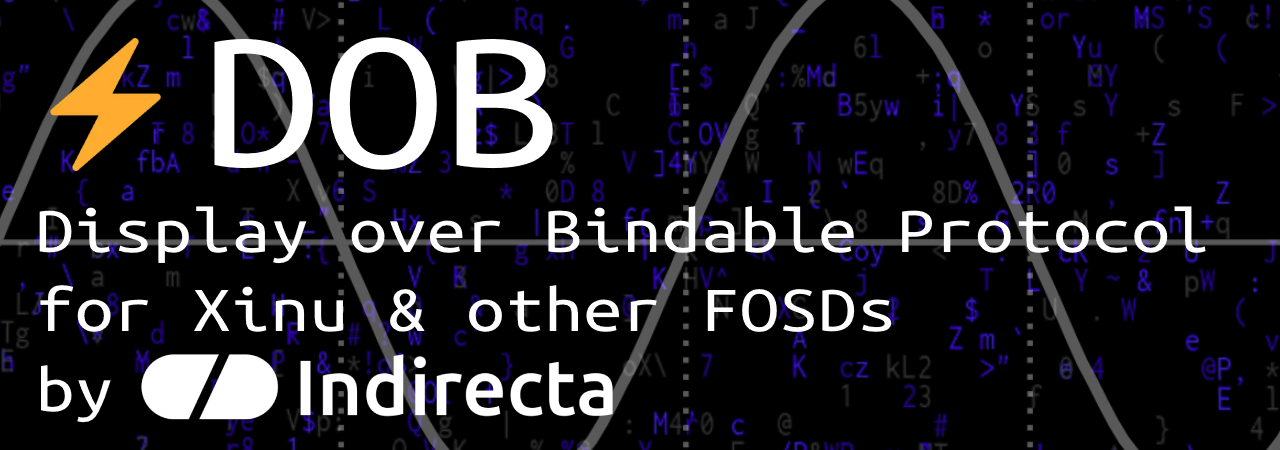
<style>
.page{position:relative;width:1280px;height:450px;background:#000000}
.page>*{position:absolute;margin:0}
.t1{font:204.9px "UbuntuMono-Regular";color:#ffffff;scale:1.18 1}
.t2{font:66.2px "UbuntuMono-Regular";color:#ffffff;scale:1.18 1}
</style>
<div class="page">
<p class="t1" style="left:214px;top:37px;width:339px;height:133px">DOB</p>
<p class="t2" style="left:39px;top:206px;width:1167px;height:217px">Display over Bindable Protocol<br>for Xinu &amp; other FOSDs<br>by</p>
</div>
